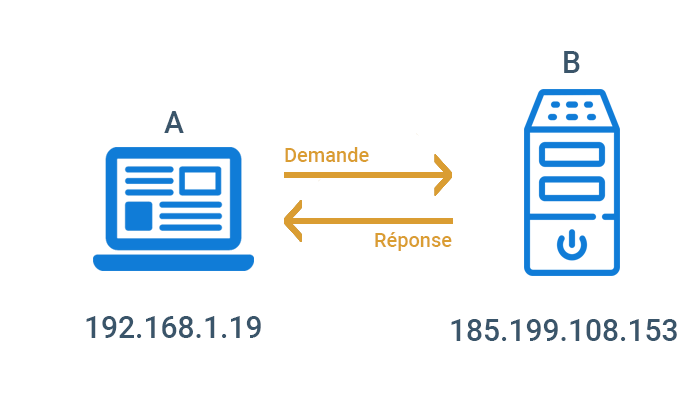
<style>
.page{position:relative;width:700px;height:400px;background:#ffffff}
.page>*{position:absolute;margin:0}
.t1{font:30px "Roboto-Medium";color:#3a556a}
.t2{font:20px "Roboto-Medium";color:#da9d32}
</style>
<div class="page">
<p class="t1" style="left:564px;top:51px;width:16px;height:22px">B</p>
<p class="t1" style="left:164px;top:111px;width:20px;height:22px">A</p>
<p class="t2" style="left:285px;top:147px;width:84px;height:15px">Demande</p>
<p class="t2" style="left:375px;top:232px;width:77px;height:19px">Réponse</p>
<p class="t1" style="left:86px;top:316px;width:175px;height:22px">192.168.1.19</p>
<p class="t1" style="left:451px;top:319px;width:226px;height:22px">185.199.108.153</p>
</div>
